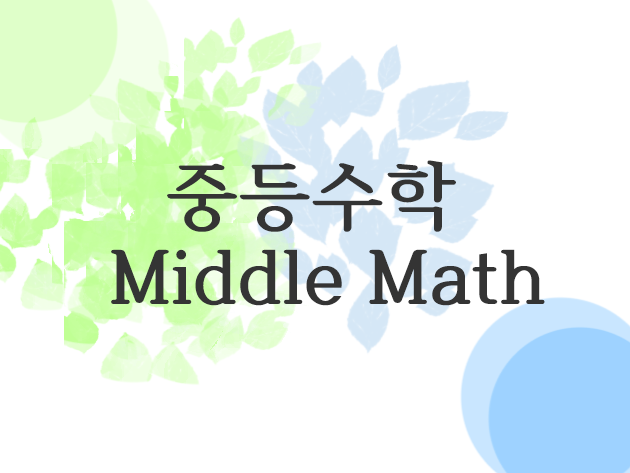
<style>
.page{position:relative;width:630px;height:473px;background:#ffffff}
.page>*{position:absolute;margin:0}
.t1{font:75px "HCRBatang-Bold";color:#343434}
</style>
<div class="page">
<p class="t1" style="left:167px;top:160px;width:289px;height:72px">중등수학</p>
<p class="t1" style="left:111px;top:249px;width:434px;height:57px">Middle Math</p>
</div>
